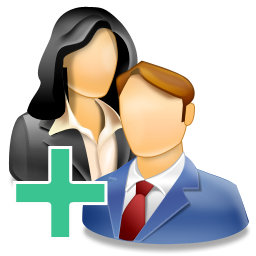
<style>
.page{position:relative;width:256px;height:256px;background:#ffffff}
.page>*{position:absolute;margin:0}
.t1{font:200px "Impact";color:#3ac492}
</style>
<div class="page">
<p class="t1" style="left:13px;top:146px;width:95px;height:94px">+</p>
</div>
